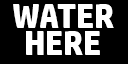
<style>
.page{position:relative;width:128px;height:64px;background:#000000}
.page>*{position:absolute;margin:0}
.t1{font:35.4px/27.1px "HPSimplified-Bold";letter-spacing:-0.01em;color:#ffffff}
</style>
<div class="page">
<p class="t1" style="left:13px;top:4px;width:101px;height:51px;text-align:center">WATER<br>HERE</p>
</div>
